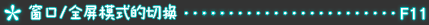
<style>
.page{position:relative;width:429px;height:25px;background:#333333}
.page>*{position:absolute;margin:0}
.t1{font:18px "¢è?";color:#ffffff}
</style>
<div class="page">
<p class="t1" style="left:29px;top:4px;width:148px;height:16px">窗口/全屏模式的切换</p>
</div>
